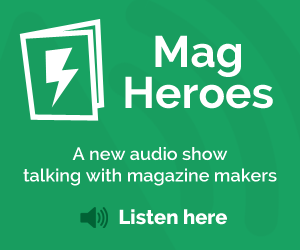
<style>
.page{position:relative;width:300px;height:250px;background:#189d5f}
.page>*{position:absolute;margin:0}
.t1{font:44px/41px "Raleway-Bold";color:#ffffff}
.t2{font:18px "Raleway-SemiBold";color:#ffffff}
.t3{font:20px "Raleway-ExtraBold";color:#ffffff}
</style>
<div class="page">
<p class="t1" style="left:125px;top:35px;width:148px;height:74px;text-align:center">Mag<br>Heroes</p>
<p class="t2" style="left:23px;top:147px;width:254px;height:39px;text-align:center">A new audio show<br>talking with magazine makers</p>
<p class="t3" style="left:119px;top:209px;width:108px;height:16px">Listen here</p>
</div>
